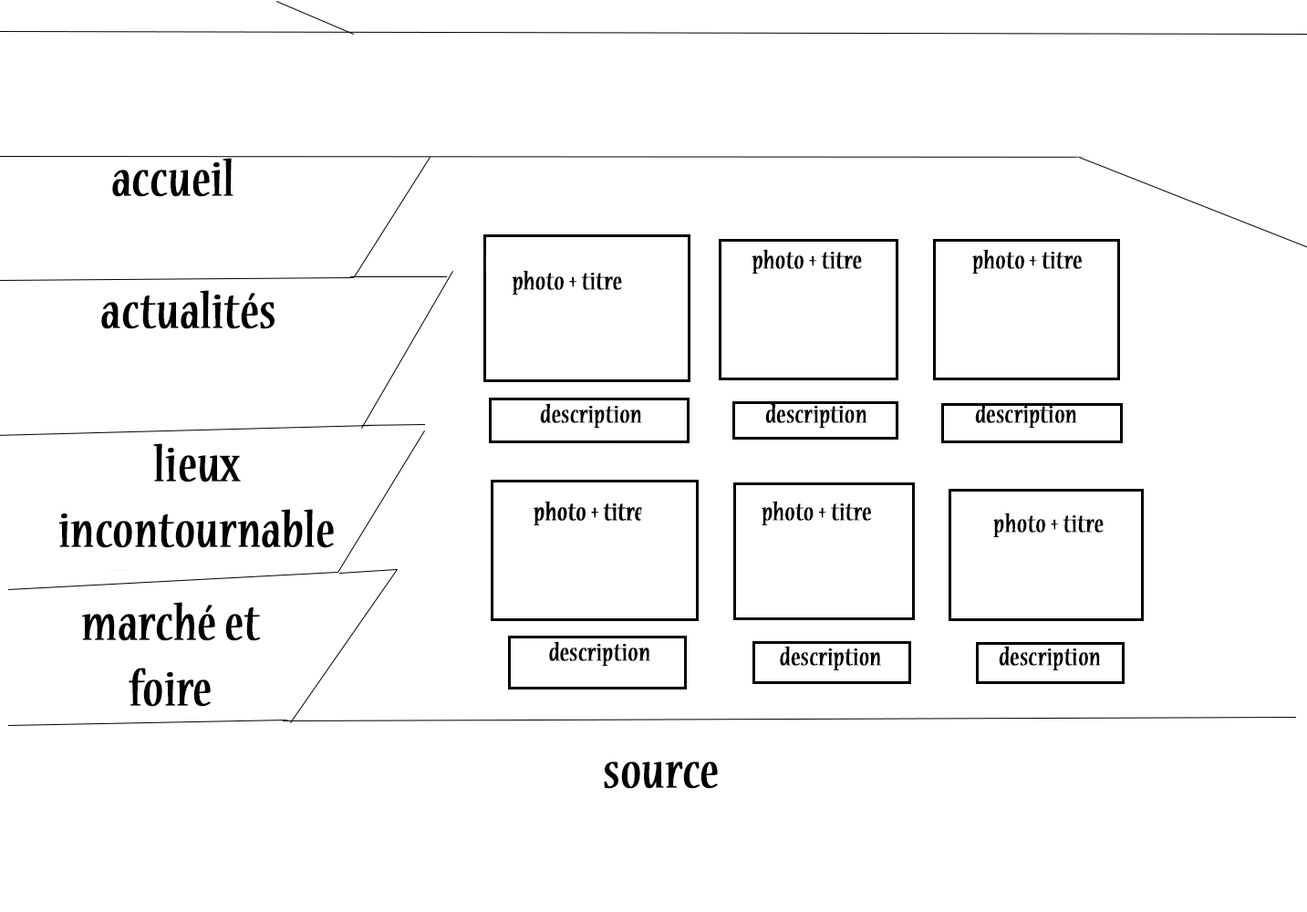
<style>
.page{position:relative;width:1307px;height:912px;background:#ffffff}
.page>*{position:absolute;margin:0}
.t1{font:54.7px "NuevaStd-Cond";color:#000000;font-weight:bold}
.t2{font:27.4px "NuevaStd-Cond";color:#000000;font-weight:bold}
</style>
<div class="page">
<p class="t1" style="left:112px;top:158px;width:122px;height:39px">accueil</p>
<p class="t2" style="left:752px;top:249px;width:110px;height:25px">photo + titre</p>
<p class="t2" style="left:972px;top:249px;width:110px;height:25px">photo + titre</p>
<p class="t2" style="left:512px;top:270px;width:110px;height:25px">photo + titre</p>
<p class="t1" style="left:101px;top:290px;width:174px;height:39px">actualités</p>
<p class="t2" style="left:540px;top:403px;width:102px;height:25px">description</p>
<p class="t2" style="left:765px;top:403px;width:103px;height:25px">description</p>
<p class="t2" style="left:975px;top:403px;width:102px;height:25px">description</p>
<p class="t1" style="left:58px;top:443px;width:276px;height:105px;text-align:center">lieux <br>incontournable</p>
<p class="t2" style="left:762px;top:501px;width:109px;height:24px">photo + titre</p>
<p class="t2" style="left:993px;top:513px;width:111px;height:24px">photo + titre</p>
<p class="t1" style="left:82px;top:602px;width:178px;height:105px;text-align:center">marché et foire</p>
<p class="t2" style="left:549px;top:641px;width:101px;height:25px">description</p>
<p class="t2" style="left:780px;top:646px;width:101px;height:24px">description</p>
<p class="t2" style="left:999px;top:646px;width:102px;height:24px">description</p>
<p class="t1" style="left:604px;top:762px;width:114px;height:27px">source</p>
</div>
